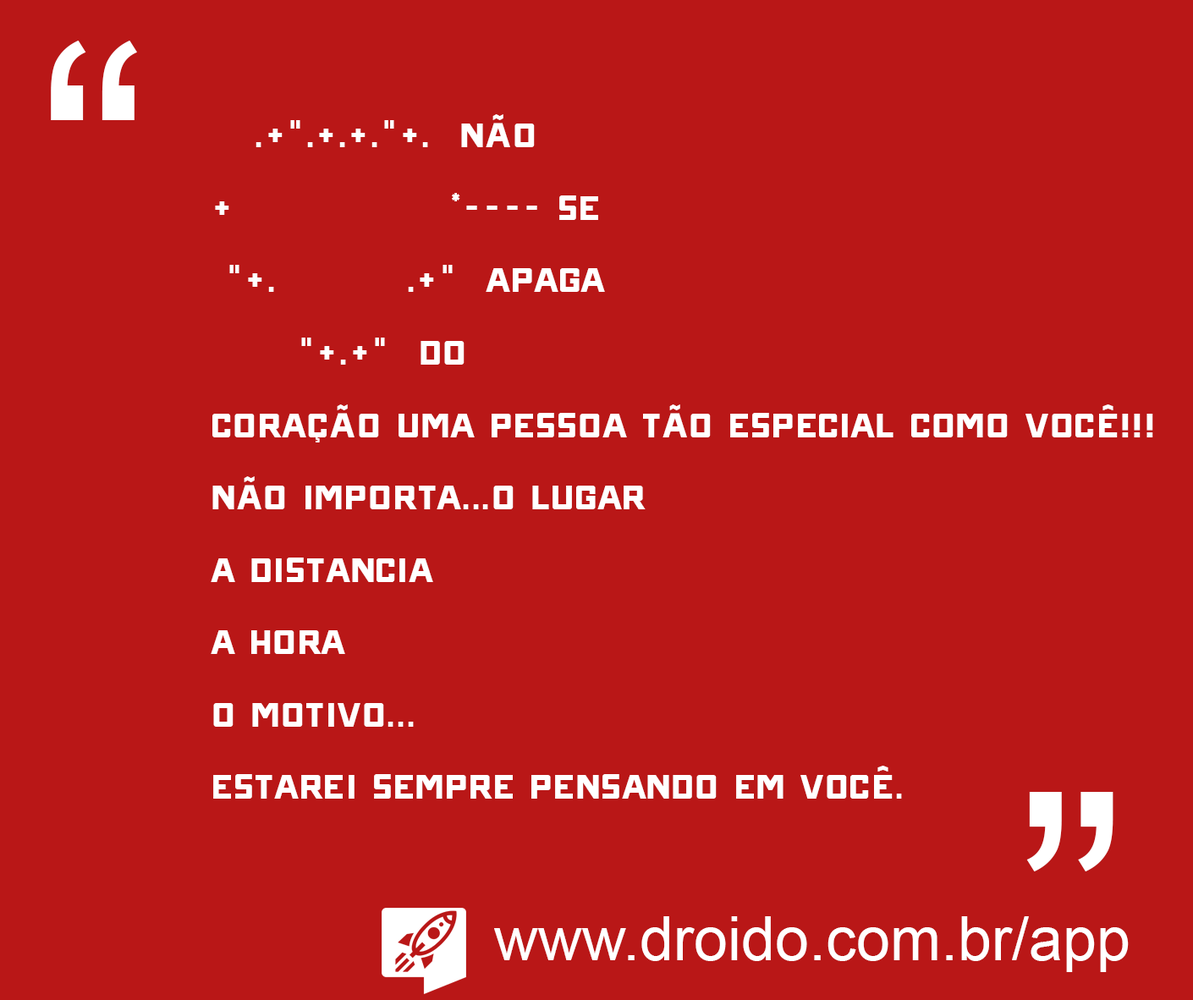
<style>
.page{position:relative;width:1193px;height:1000px;background:#b91717}
.page>*{position:absolute;margin:0}
.t1{font:338.3px "ArialMT";color:#ffffff}
.t2{font:54.6px "ONRAMP";color:#ffffff}
.t3{font:60.9px "ArialMT";color:#ffffff}
</style>
<div class="page">
<p class="t1" style="left:51px;top:41px;width:86px;height:79px">“</p>
<p class="t2" style="left:211px;top:114px;width:942px;height:684px">.+".+.+."+.  Não<br>+               *---- Se<br> "+.         .+"  Apaga<br>      "+.+"  do<br>Coração uma pessoa tão especial como você!!!<br>Não importa...O lugar<br>A distancia<br>A hora<br>O motivo...                     <br>Estarei sempre Pensando Em Você.</p>
<p class="t1" style="left:1026px;top:792px;width:87px;height:79px">”</p>
<p class="t3" style="left:494px;top:916px;width:634px;height:56px">www.droido.com.br/app</p>
</div>
